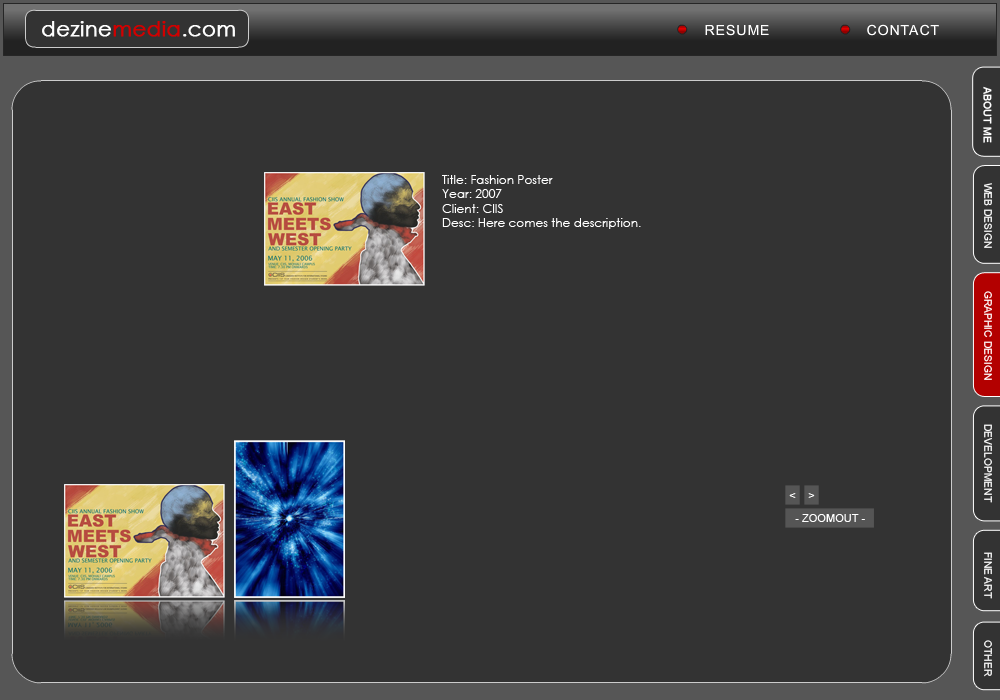
<style>
.page{position:relative;width:1000px;height:700px;background:#333333}
.page>*{position:absolute;margin:0}
.t1{font:21px "CenturyGothic";color:#fefefe;font-weight:bold}
.t2{font:21px "CenturyGothic";color:#d20000;font-weight:bold}
.t3{font:10.4px "ArialMT";color:#ffffff;font-weight:bold}
.t4{font:12px "CenturyGothic";color:#ffffff}
.t5{font:10.4px "ArialMT";color:#ffffff}
.t6{font:11.1px "ArialMT";color:#ffffff}
.t7{font:10.4px "ArialMT"}
</style>
<div class="page">
<p class="t1" style="left:42px;top:21px;width:193px;height:16px">dezine<span class="t2">media</span>.com</p>
<p class="t3" style="left:983px;top:86px;width:9px;height:57px;rotate:90deg">ABOUT ME</p>
<p class="t4" style="left:442px;top:175px;width:199px;height:54px">Title: Fashion Poster<br>Year: 2007<br>Client: CIIS<br>Desc: Here comes the description.</p>
<p class="t5" style="left:984px;top:183px;width:8px;height:65px;rotate:90deg">WEB DESIGN</p>
<p class="t5" style="left:984px;top:291px;width:8px;height:89px;rotate:90deg">GRAPHIC DESIGN</p>
<p class="t5" style="left:984px;top:424px;width:8px;height:79px;rotate:90deg">DEVELOPMENT</p>
<p class="t6" style="left:789px;top:493px;width:7px;height:5px">&lt;</p>
<p class="t6" style="left:808px;top:493px;width:7px;height:5px">&gt;</p>
<p class="t6" style="left:795px;top:514px;width:70px;height:8px">- ZOOMOUT -</p>
<p class="t5" style="left:984px;top:552px;width:8px;height:47px;rotate:90deg">FINE ART</p>
<p class="t7" style="left:984px;top:640px;width:8px;height:37px;rotate:90deg">OTHER</p>
</div>
